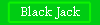
<style>
.page{position:relative;width:100px;height:25px;background:#00cc13}
.page>*{position:absolute;margin:0}
.t1{font:13.9px "FootlightMTLight";color:#ffffff}
</style>
<div class="page">
<p class="t1" style="left:21px;top:6px;width:59px;height:13px">Black Jack</p>
</div>
